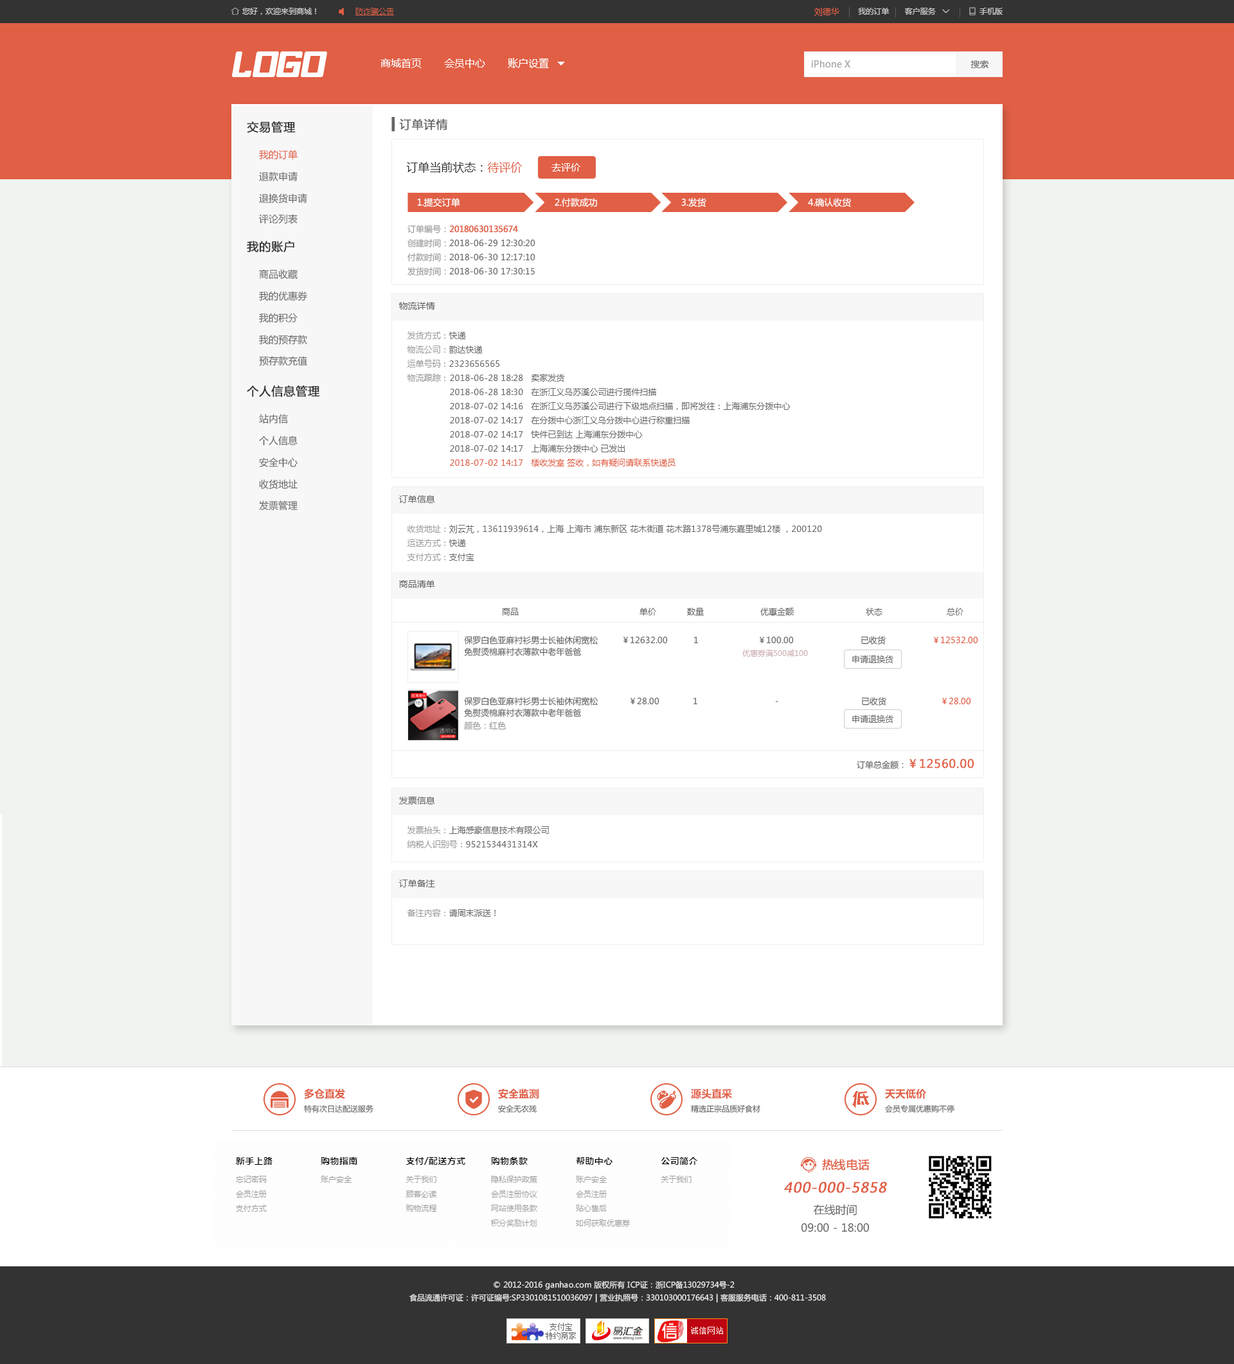
<style>
.page{position:relative;width:1234px;height:1364px;background:#ffffff}
.page>*{position:absolute;margin:0}
.t1{font:8.4px "MicrosoftYaHei";color:#e15f45}
.t2{font:10.3px "MicrosoftYaHei";color:#ffffff}
.t3{font:9px "MicrosoftYaHei";color:#999999}
.t4{font:9px "MicrosoftYaHei";color:#666666}
.t5{font:11.6px "MicrosoftYaHei";color:#333333;font-weight:bold}
.t6{font:11.6px "MicrosoftYaHei";color:#666666;font-weight:bold}
.t7{font:9.6px "MicrosoftYaHei";color:#e15f45}
.t8{font:11.6px "MicrosoftYaHei";color:#333333}
.t9{font:11.6px "MicrosoftYaHei";color:#e15f45}
.t10{font:9.6px "MicrosoftYaHei";color:#666666}
.t11{font:9.6px "MicrosoftYaHei";color:#ffffff}
.t12{font:9px "MicrosoftYaHei";color:#fefefe}
.t13{font:9px "MicrosoftYaHei";color:#ffffff}
.t14{font:8.4px/14.1px "MicrosoftYaHei";color:#666666}
.t15{font:8.4px/14.1px "MicrosoftYaHei";color:#999999}
.t16{font:8.4px/14.1px "MicrosoftYaHei";color:#e15f45;font-weight:bold}
.t17{font:8.4px/14.1px "MicrosoftYaHei";color:#e15f45}
.t18{font:8.4px "MicrosoftYaHei";color:#666666}
.t19{font:8.4px/11.6px "MicrosoftYaHei";color:#666666}
.t20{font:7.7px "MicrosoftYaHei";color:#cdaeae}
.t21{font:8.4px "MicrosoftYaHei";color:#999999}
.t22{font:11.6px "MicrosoftYaHei";color:#e15f45;font-weight:bold}
.t23{font:10.3px "MicrosoftYaHei-Bold";color:#e15f45}
.t24{font:7.7px "MicrosoftYaHei";color:#666666}
.t25{font:13.8px "MicrosoftYaHei";color:#e15f45;font-weight:bold;font-style:italic}
.t26{font:10.9px/17.9px "MicrosoftYaHei";color:#666666}
.t27{font:7.7px/12.9px "MicrosoftYaHei";color:#eeeeee}
</style>
<div class="page">
<p class="t1" style="left:814px;top:8px;width:25px;height:8px">刘德华</p>
<p class="t2" style="left:380px;top:58px;width:169px;height:10px">商城首页       会员中心       账户设置</p>
<p class="t3" style="left:812px;top:60px;width:38px;height:7px">iPhone X</p>
<p class="t4" style="left:970px;top:60px;width:18px;height:8px">搜索</p>
<p class="t5" style="left:247px;top:121px;width:49px;height:12px">交易管理</p>
<p class="t6" style="left:391px;top:117px;width:57px;height:15px">▍订单详情</p>
<p class="t7" style="left:259px;top:150px;width:38px;height:10px">我的订单</p>
<p class="t8" style="left:406px;top:162px;width:116px;height:11px">订单当前状态：<span class="t9">待评价</span></p>
<p class="t10" style="left:259px;top:172px;width:38px;height:10px">退款申请</p>
<p class="t11" style="left:551px;top:163px;width:29px;height:9px">去评价</p>
<p class="t10" style="left:259px;top:193px;width:48px;height:11px">退换货申请</p>
<p class="t12" style="left:417px;top:198px;width:43px;height:10px">1.提交订单</p>
<p class="t13" style="left:555px;top:198px;width:42px;height:9px">2.付款成功</p>
<p class="t13" style="left:681px;top:198px;width:25px;height:10px">3.发货</p>
<p class="t13" style="left:808px;top:198px;width:43px;height:10px">4.确认收货</p>
<p class="t10" style="left:259px;top:214px;width:38px;height:10px">评论列表</p>
<p class="t14" style="left:407px;top:225px;width:128px;height:51px"><span class="t15">订单编号：</span><span class="t16">20180630135674<br></span><span class="t15">创建时间：</span>2018-06-29 12:30:20<br><span class="t15">付款时间：</span>2018-06-30 12:17:10<br><span class="t15">发货时间：</span>2018-06-30 17:30:15</p>
<p class="t5" style="left:247px;top:241px;width:47px;height:12px">我的账户</p>
<p class="t10" style="left:259px;top:269px;width:38px;height:11px">商品收藏</p>
<p class="t10" style="left:259px;top:291px;width:48px;height:10px">我的优惠券</p>
<p class="t4" style="left:398px;top:302px;width:37px;height:8px">物流详情</p>
<p class="t10" style="left:259px;top:313px;width:38px;height:10px">我的积分</p>
<p class="t10" style="left:259px;top:335px;width:48px;height:9px">我的预存款</p>
<p class="t14" style="left:407px;top:332px;width:92px;height:50px"><span class="t15">发货方式：</span>快递<br><span class="t15">物流公司：</span>韵达快递<br><span class="t15">运单号码：</span>2323656565<br><span class="t15">物流跟踪：</span></p>
<p class="t10" style="left:259px;top:356px;width:48px;height:10px">预存款充值</p>
<p class="t14" style="left:450px;top:374px;width:340px;height:92px">2018-06-28 18:28   卖家发货<br>2018-06-28 18:30   在浙江义乌苏溪公司进行揽件扫描<br>2018-07-02 14:16   在浙江义乌苏溪公司进行下级地点扫描，即将发往：上海浦东分拨中心<br>2018-07-02 14:17   在分拨中心浙江义乌分拨中心进行称重扫描<br>2018-07-02 14:17   快件已到达 上海浦东分拨中心<br>2018-07-02 14:17   上海浦东分拨中心 已发出<br><span class="t17">2018-07-02 14:17   楼收发室 签收，如有疑问请联系快递员</span></p>
<p class="t5" style="left:247px;top:386px;width:73px;height:11px">个人信息管理</p>
<p class="t10" style="left:259px;top:414px;width:29px;height:10px">站内信</p>
<p class="t10" style="left:259px;top:436px;width:38px;height:10px">个人信息</p>
<p class="t10" style="left:259px;top:457px;width:38px;height:11px">安全中心</p>
<p class="t10" style="left:259px;top:479px;width:38px;height:11px">收货地址</p>
<p class="t4" style="left:398px;top:495px;width:37px;height:8px">订单信息</p>
<p class="t10" style="left:259px;top:501px;width:38px;height:9px">发票管理</p>
<p class="t14" style="left:407px;top:525px;width:415px;height:36px"><span class="t15">收货地址：</span>刘云芃，13611939614，上海 上海市 浦东新区 花木街道 花木路1378号浦东嘉里城12楼 ，200120<br><span class="t15">运送方式：</span>快递<br><span class="t15">支付方式：</span>支付宝</p>
<p class="t4" style="left:399px;top:580px;width:36px;height:8px">商品清单</p>
<p class="t18" style="left:502px;top:608px;width:461px;height:8px">商品                                               单价            数量                      优惠金额                            状态                         总价</p>
<p class="t19" style="left:464px;top:636px;width:134px;height:20px">保罗白色亚麻衬衫男士长袖休闲宽松<br>免熨烫棉麻衬衣薄款中老年爸爸</p>
<p class="t18" style="left:623px;top:636px;width:355px;height:8px">￥12632.00          1                       ￥100.00                          已收货    <span class="t1">              ￥12532.00</span></p>
<p class="t20" style="left:742px;top:650px;width:66px;height:7px">优惠券满500减100</p>
<p class="t18" style="left:852px;top:655px;width:41px;height:8px">申请退换货</p>
<p class="t19" style="left:464px;top:697px;width:134px;height:20px">保罗白色亚麻衬衫男士长袖休闲宽松<br>免熨烫棉麻衬衣薄款中老年爸爸</p>
<p class="t18" style="left:630px;top:697px;width:341px;height:9px">￥28.00             1                              -                                已收货<span class="t1">                     ￥28.00</span></p>
<p class="t21" style="left:464px;top:722px;width:42px;height:8px">颜色：红色</p>
<p class="t18" style="left:852px;top:715px;width:41px;height:8px">申请退换货</p>
<p class="t22" style="left:857px;top:759px;width:116px;height:10px"><span class="t18">订单总金额：</span>￥12560.00</p>
<p class="t4" style="left:399px;top:797px;width:36px;height:7px">发票信息</p>
<p class="t14" style="left:407px;top:826px;width:142px;height:22px"><span class="t15">发票抬头：</span>上海感豪信息技术有限公司<br><span class="t15">纳税人识别号：</span>9521534431314X</p>
<p class="t4" style="left:398px;top:880px;width:37px;height:7px">订单备注</p>
<p class="t18" style="left:407px;top:909px;width:88px;height:8px"><span class="t21">备注内容：</span>请周末派送！</p>
<p class="t23" style="left:304px;top:1088px;width:41px;height:11px">多仓直发</p>
<p class="t23" style="left:498px;top:1088px;width:41px;height:11px">安全监测</p>
<p class="t23" style="left:691px;top:1088px;width:41px;height:11px">源头直采</p>
<p class="t23" style="left:885px;top:1088px;width:41px;height:11px">天天低价</p>
<p class="t24" style="left:304px;top:1105px;width:69px;height:8px">特有次日达配送服务</p>
<p class="t24" style="left:498px;top:1105px;width:39px;height:8px">安全无农残</p>
<p class="t24" style="left:691px;top:1105px;width:69px;height:8px">精选正宗品质好食材</p>
<p class="t24" style="left:885px;top:1105px;width:69px;height:8px">会员专属优惠购不停</p>
<p class="t22" style="left:822px;top:1159px;width:47px;height:12px">热线电话</p>
<p class="t25" style="left:784px;top:1182px;width:103px;height:11px">400-000-5858</p>
<p class="t26" style="left:801px;top:1204px;width:68px;height:28px;text-align:center">在线时间<br>09:00 - 18:00</p>
<p class="t27" style="left:409px;top:1281px;width:417px;height:22px;text-align:center">© 2012-2016 ganhao.com 版权所有 ICP证：浙ICP备13029734号-2   <br>食品流通许可证：许可证编号:SP3301081510036097 | 营业执照号：330103000176643 | 客服服务电话：400-811-3508</p>
</div>
